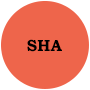
<style>
.page{position:relative;width:90px;height:90px;background:#ee654b}
.page>*{position:absolute;margin:0}
.t1{font:16px "BookmanOldStyle-Bold";color:#000000}
</style>
<div class="page">
<p class="t1" style="left:27px;top:39px;width:35px;height:13px">SHA</p>
</div>
